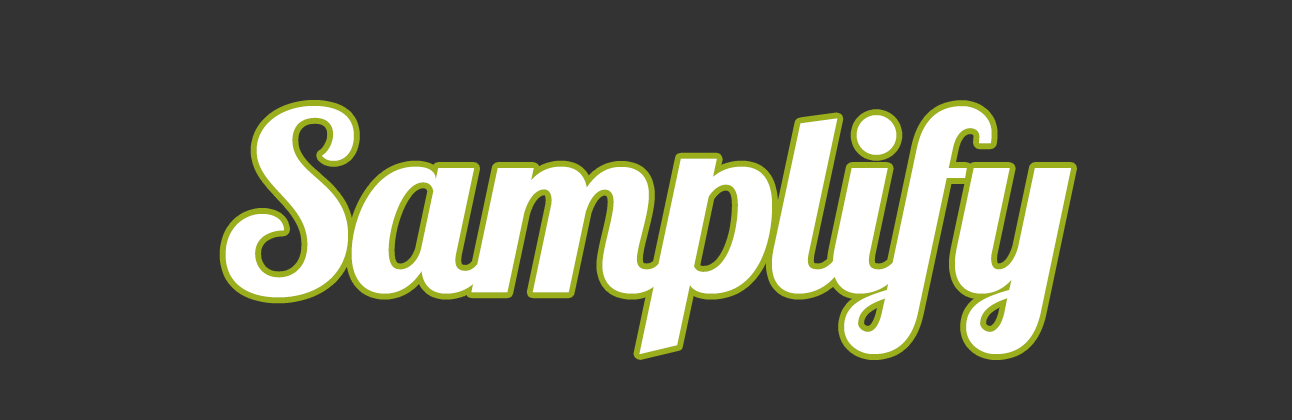
<style>
.page{position:relative;width:1292px;height:420px;background:#333333}
.page>*{position:absolute;margin:0}
.t1{font:248px "Lobster1.4";letter-spacing:-0.02em;color:#ffffff}
</style>
<div class="page">
<p class="t1" style="left:225px;top:106px;width:846px;height:248px">Samplify</p>
</div>
